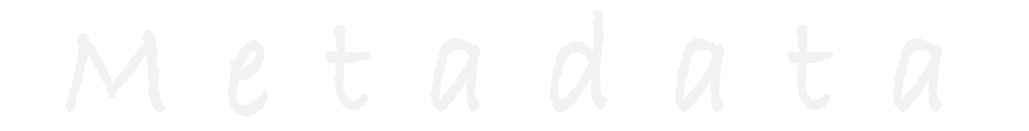
<style>
.page{position:relative;width:1029px;height:131px;background:#ffffff}
.page>*{position:absolute;margin:0}
.t1{font:150.4px "BradleyHandITCTTBold";letter-spacing:0.46em;color:#f2f2f2;scale:0.81 1}
</style>
<div class="page">
<p class="t1" style="left:66px;top:10px;width:876px;height:108px">Metadata</p>
</div>
